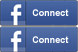
<style>
.page{position:relative;width:78px;height:52px}
.page>*{position:absolute;margin:0}
.t1{font:9.5px "Arial-BoldMT";color:#ffffff;scale:0.95 1}
</style>
<div class="page">
<p class="t1" style="left:32px;top:9px;width:37px;height:7px">Connect</p>
<p class="t1" style="left:32px;top:36px;width:37px;height:7px">Connect</p>
</div>
